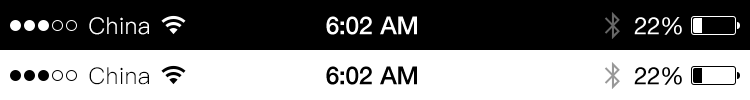
<style>
.page{position:relative;width:750px;height:100px;background:#ffffff}
.page>*{position:absolute;margin:0}
.t1{font:23px "PingFang-SC-Regular";letter-spacing:0.02em;color:#ffffff}
.t2{font:25px "HelveticaNeue-Medium";letter-spacing:-0.02em;color:#ffffff}
.t3{font:24px "HelveticaNeue";letter-spacing:-0.02em;color:#ffffff}
.t4{font:23px "PingFang-SC-Regular";letter-spacing:0.02em;color:#000000}
.t5{font:25px "HelveticaNeue-Medium";letter-spacing:-0.02em;color:#000000}
.t6{font:24px "HelveticaNeue";letter-spacing:-0.02em;color:#000000}
</style>
<div class="page">
<p class="t1" style="left:89px;top:17px;width:60px;height:18px">China</p>
<p class="t2" style="left:326px;top:16px;width:91px;height:19px">6:02 AM</p>
<p class="t3" style="left:634px;top:17px;width:48px;height:18px">22%</p>
<p class="t4" style="left:89px;top:67px;width:60px;height:18px">China</p>
<p class="t5" style="left:326px;top:66px;width:91px;height:19px">6:02 AM</p>
<p class="t6" style="left:634px;top:67px;width:48px;height:18px">22%</p>
</div>
